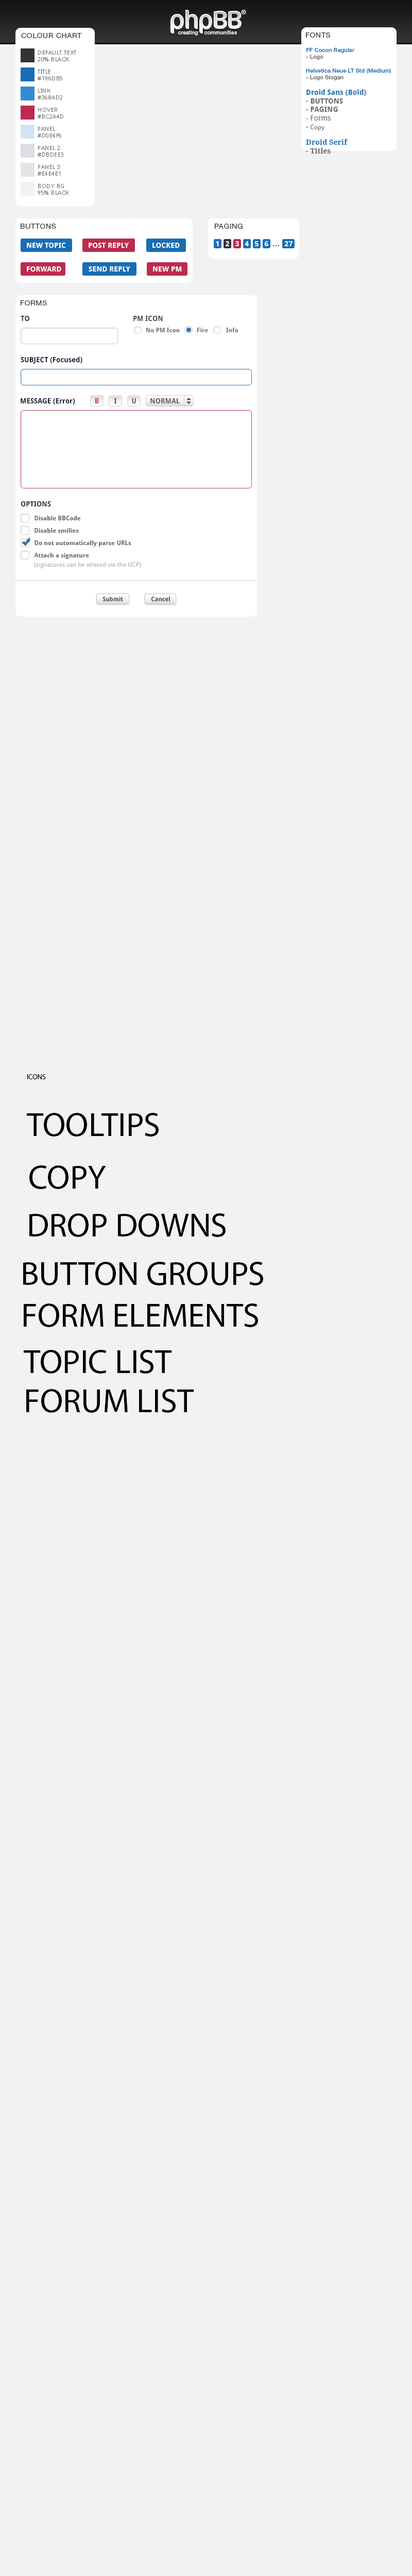
<style>
.page{position:relative;width:412px;height:2576px;background:#f2f2f2}
.page>*{position:absolute;margin:0}
.t1{font:26.3px "Cocon-Regular";letter-spacing:-0.065em;color:#ebebeb}
.t2{font:26.3px "Cocon-Regular";letter-spacing:-0.04em;color:#ebebeb;scale:0.95 1}
.t3{font:26.3px "Cocon-Regular";letter-spacing:-0.05em;color:#ebebeb}
.t4{font:26.3px "Cocon-Regular";letter-spacing:-0.045em;color:#ebebeb}
.t5{font:6px "HelveticaNeue-Medium";letter-spacing:0.02em;color:#ffffff}
.t6{font:7.2px "HelveticaNeueLTStd-Roman";letter-spacing:0.05em;color:#333333;text-transform:uppercase}
.t7{font:5.7px "HelveticaNeueLTStd-Md";letter-spacing:0.02em;color:#ffffff;scale:0.9 1}
.t8{font:5.7px "HelveticaNeueLTStd-Md";letter-spacing:0.02em;color:#ffffff;scale:0.94 1}
.t9{font:5.7px "DroidSans";letter-spacing:0.05em;color:#666666;text-transform:uppercase}
.t10{font:5.7px "HelveticaNeueLTStd-Md";letter-spacing:0.01em;color:#196db5}
.t11{font:5.7px "HelveticaNeueLTStd-Md";letter-spacing:0.01em;color:#666666}
.t12{font:7.2px "DroidSans-Bold";letter-spacing:0.01em;color:#196db5}
.t13{font:7.2px "DroidSans-Bold";letter-spacing:0.01em;color:#666666}
.t14{font:7.2px "DroidSans";letter-spacing:0.01em;color:#666666}
.t15{font:6.2px "DroidSans";letter-spacing:0.01em;color:#666666}
.t16{font:7.2px "DroidSerif-Bold";letter-spacing:0.01em;color:#196db5}
.t17{font:7.2px "DroidSerif-Bold";letter-spacing:0.01em;color:#666666}
.t18{font:7.2px "DroidSans-Bold";letter-spacing:0.01em;color:#ffffff}
.t19{font:7.2px "DroidSans-Bold";letter-spacing:0.05em;color:#fefefe;text-transform:uppercase}
.t20{font:7.2px "DroidSans-Bold";letter-spacing:0.05em;color:#333333;text-transform:uppercase}
.t21{font:7.2px "DroidSans-Bold";letter-spacing:0.01em;color:#fefefe;text-transform:uppercase}
.t22{font:7.2px "DroidSans-Bold";color:#333333;scale:0.97 1}
.t23{font:6.2px "DroidSans-Bold";color:#666666}
.t24{font:7.2px "DroidSans-Bold";color:#191936;scale:0.97 1}
.t25{font:7.2px "DroidSans-Bold";color:#bc2a4d;scale:0.97 1}
.t26{font:7.2px "DroidSans-Bold";color:#4d4d4d;scale:0.97 1}
.t27{font:6.2px/12.4px "DroidSans-Bold";color:#666666}
.t28{font:6.2px/9.3px "DroidSans";color:#b3b3b3}
.t29{font:6.2px "DroidSans-Bold";color:#4d4d4d;scale:0.97 1}
.t30{font:7.2px "MyriadPro-Regular";color:#000000}
.t31{font:33.5px "MyriadPro-Regular";color:#000000}
</style>
<div class="page">
<p class="t1" style="left:171px;top:10px;width:71px;height:23px">ph<span class="t2">p</span><span class="t3">B</span><span class="t4">B</span></p>
<p class="t5" style="left:241px;top:10px;width:5px;height:4px">®</p>
<p class="t6" style="left:21px;top:33px;width:61px;height:5px">Colour Chart</p>
<p class="t7" style="left:178px;top:30px;width:20px;height:6px">creating</p>
<p class="t8" style="left:205px;top:30px;width:32px;height:5px">communities</p>
<p class="t6" style="left:306px;top:32px;width:24px;height:6px">Fonts</p>
<p class="t9" style="left:38px;top:50px;width:38px;height:11px;text-align:justify">Default Text<br>20% Black</p>
<p class="t10" style="left:306px;top:48px;width:85px;height:106px;text-align:justify">FF Cocon Regular<br><span class="t11">- Logo<br></span><br>Helvetica Neue LT Std (Medium)<br><span class="t11">- Logo Slogan<br><br></span><span class="t12">Droid Sans (Bold)<br></span><span class="t13">- BUTTONS<br>- PAGING<br></span><span class="t14">- Forms<br></span><span class="t13">- </span><span class="t15">Copy<br><br></span><span class="t16">Droid Serif<br></span><span class="t17">- Titles</span></p>
<p class="t9" style="left:38px;top:70px;width:24px;height:10px;text-align:justify">Title<br>#196db5</p>
<p class="t9" style="left:38px;top:89px;width:24px;height:10px;text-align:justify">Link<br>#368ad2</p>
<p class="t9" style="left:38px;top:108px;width:25px;height:10px;text-align:justify">Hover<br>#bc2a4d</p>
<p class="t9" style="left:38px;top:127px;width:23px;height:11px;text-align:justify">PANEL<br>#d0e4f6</p>
<p class="t9" style="left:38px;top:146px;width:25px;height:11px;text-align:justify">PANEL 2<br>#dbdee3</p>
<p class="t9" style="left:38px;top:165px;width:22px;height:11px;text-align:justify">Panel 3<br>#e4e4e1</p>
<p class="t9" style="left:38px;top:184px;width:31px;height:11px;text-align:justify">Body BG<br>95% BLACK</p>
<p class="t6" style="left:21px;top:224px;width:35px;height:5px">buttons</p>
<p class="t6" style="left:215px;top:224px;width:28px;height:5px">PAGING</p>
<p class="t18" style="left:27px;top:243px;width:39px;height:5px">NEW TOPIC</p>
<p class="t18" style="left:89px;top:243px;width:40px;height:5px">POST REPLY</p>
<p class="t18" style="left:152px;top:243px;width:28px;height:5px">LOCKED</p>
<p class="t19" style="left:216px;top:241px;width:3px;height:5px">1</p>
<p class="t19" style="left:225px;top:241px;width:4px;height:5px">2</p>
<p class="t19" style="left:235px;top:241px;width:4px;height:5px">3</p>
<p class="t19" style="left:245px;top:241px;width:4px;height:5px">4</p>
<p class="t19" style="left:255px;top:241px;width:4px;height:5px">5</p>
<p class="t19" style="left:264px;top:241px;width:4px;height:5px">6</p>
<p class="t20" style="left:273px;top:245px;width:7px;height:1px">...</p>
<p class="t19" style="left:284px;top:241px;width:9px;height:5px">27</p>
<p class="t21" style="left:27px;top:266px;width:34px;height:6px">FORWARD</p>
<p class="t21" style="left:89px;top:266px;width:41px;height:6px">SEND REPLY</p>
<p class="t18" style="left:153px;top:266px;width:29px;height:6px">NEW PM</p>
<p class="t6" style="left:21px;top:300px;width:26px;height:6px">FORMS</p>
<p class="t22" style="left:21px;top:315px;width:9px;height:6px">TO</p>
<p class="t22" style="left:133px;top:315px;width:30px;height:6px">PM ICON</p>
<p class="t23" style="left:146px;top:328px;width:34px;height:4px">No PM Icon</p>
<p class="t23" style="left:197px;top:328px;width:11px;height:4px">Fire</p>
<p class="t23" style="left:226px;top:328px;width:13px;height:4px">Info</p>
<p class="t24" style="left:21px;top:357px;width:61px;height:7px">SUBJECT (Focused)</p>
<p class="t24" style="left:21px;top:398px;width:54px;height:7px">MESSAGE (Error)</p>
<p class="t25" style="left:95px;top:398px;width:4px;height:6px">B</p>
<p class="t26" style="left:114px;top:398px;width:3px;height:6px">I</p>
<p class="t26" style="left:132px;top:398px;width:4px;height:6px">U</p>
<p class="t26" style="left:150px;top:398px;width:30px;height:6px">NORMAL</p>
<p class="t22" style="left:21px;top:501px;width:30px;height:6px">OPTIONS</p>
<p class="t27" style="left:34px;top:516px;width:107px;height:52px">Disable BBCode<br>Disable smilies<br>Do not automatically parse URLs<br>Attach a signature <br><span class="t28">(signatures can be altered via the UCP)</span></p>
<p class="t29" style="left:103px;top:596px;width:20px;height:6px">Submit</p>
<p class="t29" style="left:151px;top:596px;width:20px;height:6px">Cancel</p>
<p class="t30" style="left:27px;top:1074px;width:19px;height:5px">ICONS</p>
<p class="t31" style="left:27px;top:1113px;width:132px;height:24px">TOOLTIPS</p>
<p class="t31" style="left:29px;top:1165px;width:77px;height:24px">COPY</p>
<p class="t31" style="left:29px;top:1213px;width:197px;height:24px">DROP DOWNS</p>
<p class="t31" style="left:23px;top:1262px;width:240px;height:23px">BUTTON GROUPS</p>
<p class="t31" style="left:24px;top:1303px;width:234px;height:24px">FORM ELEMENTS</p>
<p class="t31" style="left:24px;top:1350px;width:148px;height:24px">TOPIC LIST</p>
<p class="t31" style="left:26px;top:1389px;width:168px;height:24px">FORUM LIST</p>
</div>
